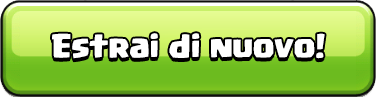
<style>
.page{position:relative;width:376px;height:97px}
.page>*{position:absolute;margin:0}
.t1{font:24px "Supercell-Magic";color:#ffffff}
</style>
<div class="page">
<p class="t1" style="left:52px;top:33px;width:273px;height:26px">Estrai di nuovo!</p>
</div>
